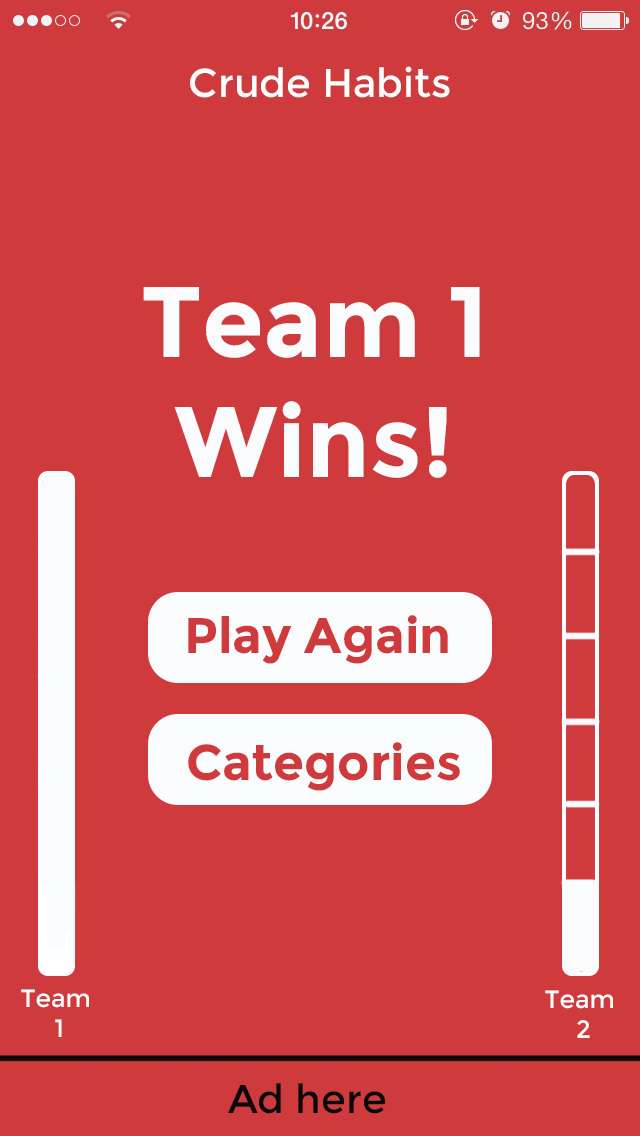
<style>
.page{position:relative;width:640px;height:1136px;background:#cf3b3d}
.page>*{position:absolute;margin:0}
.t1{font:40px "Montserrat-Regular";color:#fdfdfd}
.t2{font:100px "Montserrat-Bold";color:#fafbfc}
.t3{font:50px "Montserrat-Bold";color:#cf3b3d}
.t4{font:25px "Montserrat-Regular";color:#fdfdfd}
.t5{font:40px "Montserrat-Regular";color:#090909}
</style>
<div class="page">
<p class="t1" style="left:190px;top:66px;width:260px;height:32px">Crude Habits</p>
<p class="t2" style="left:143px;top:287px;width:337px;height:191px;text-align:center">Team 1<br>Wins!</p>
<p class="t3" style="left:188px;top:615px;width:260px;height:49px">Play Again</p>
<p class="t3" style="left:188px;top:742px;width:272px;height:49px">Categories</p>
<p class="t4" style="left:21px;top:989px;width:68px;height:48px;text-align:center">Team <br>1</p>
<p class="t4" style="left:545px;top:990px;width:68px;height:48px;text-align:center">Team <br>2</p>
<p class="t5" style="left:228px;top:1083px;width:157px;height:31px">Ad here</p>
</div>
